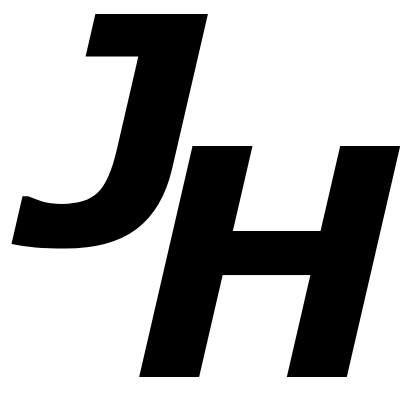
<style>
.page{position:relative;width:400px;height:400px;background:#ffffff}
.page>*{position:absolute;margin:0}
.t1{font:317.6px "Verdana-BoldItalic";color:#000000}
</style>
<div class="page">
<p class="t1" style="left:11px;top:14px;width:197px;height:235px">J</p>
<p class="t1" style="left:139px;top:146px;width:262px;height:231px">H</p>
</div>
